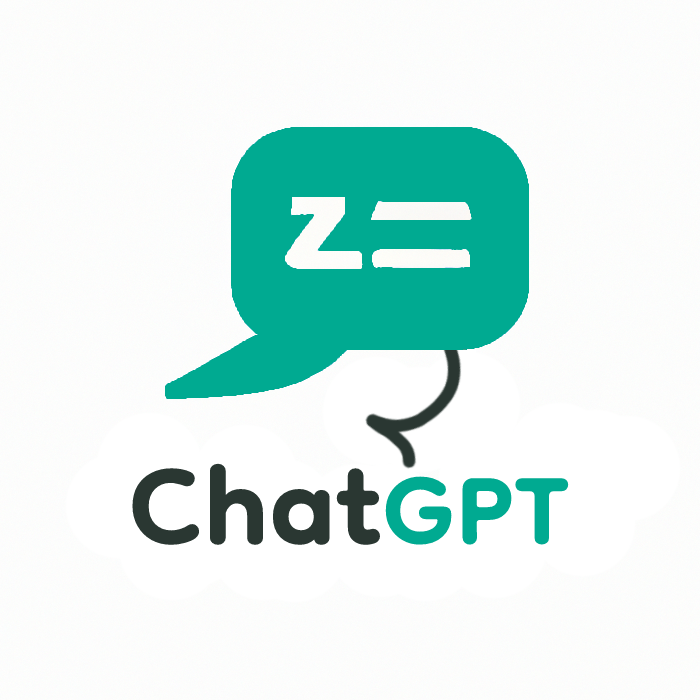
<style>
.page{position:relative;width:700px;height:700px}
.page>*{position:absolute;margin:0}
.t1{font:180px "Dongle-Bold";color:#2a3732}
.t2{font:160px "Dongle-Bold";color:#00aa91}
</style>
<div class="page">
<p class="t1" style="left:132px;top:463px;width:437px;height:82px">Chat<span class="t2">GPT</span></p>
</div>
